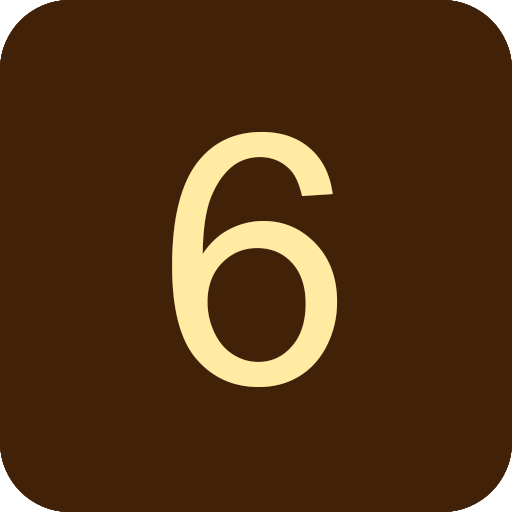
<style>
.page{position:relative;width:512px;height:512px;background:#412209}
.page>*{position:absolute;margin:0}
.t1{font:349px "ArialMT";color:#ffeba1}
</style>
<div class="page">
<p class="t1" style="left:172px;top:132px;width:166px;height:255px">6</p>
</div>
